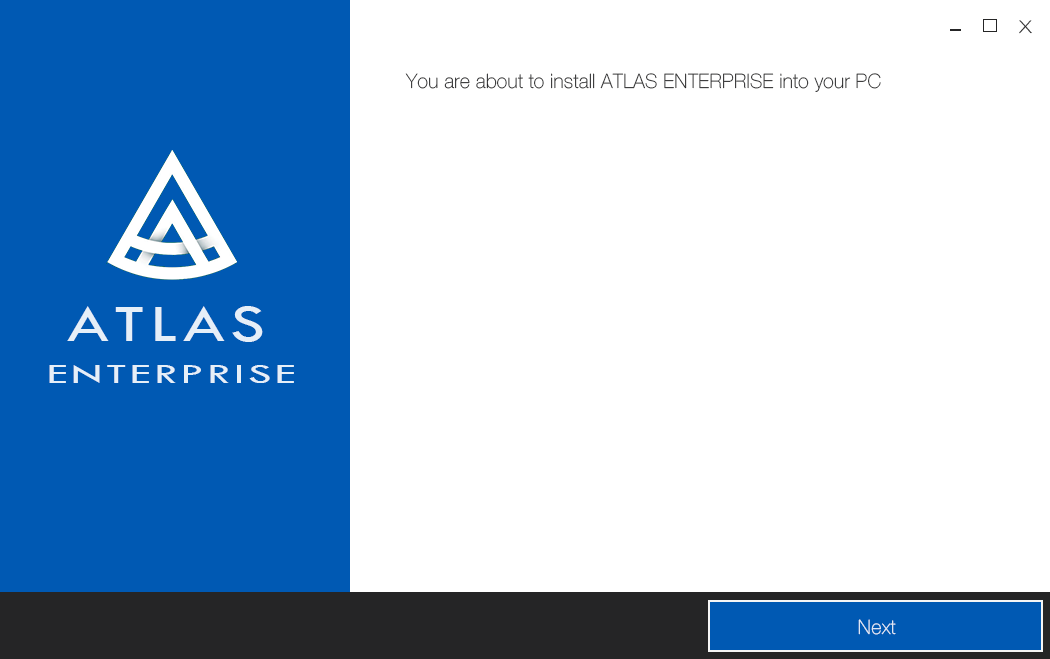
<style>
.page{position:relative;width:1050px;height:659px;background:#ffffff}
.page>*{position:absolute;margin:0}
.t1{font:24px "HelveticaNeue-Thin";color:#252526;scale:1.2 1}
.t2{font:20px "HelveticaNeue-Thin";color:#252526}
.t3{font:54px "TwCenMT-Regular";letter-spacing:0.075em;color:#e6eff8;scale:1.3 1}
.t4{font:28.8px "TwCenMT-Regular";letter-spacing:0.075em;color:#e6eff8;scale:1.62 1}
.t5{font:20px "HelveticaNeue-Thin";color:#e6eff8}
</style>
<div class="page">
<p class="t1" style="left:1019px;top:20px;width:13px;height:14px">x</p>
<p class="t2" style="left:405px;top:73px;width:476px;height:19px">You are about to install ATLAS ENTERPRISE into your PC</p>
<p class="t3" style="left:67px;top:306px;width:196px;height:36px">ATLAS</p>
<p class="t4" style="left:49px;top:365px;width:245px;height:18px">ENTERPRISE</p>
<p class="t5" style="left:858px;top:619px;width:38px;height:16px">Next</p>
</div>
